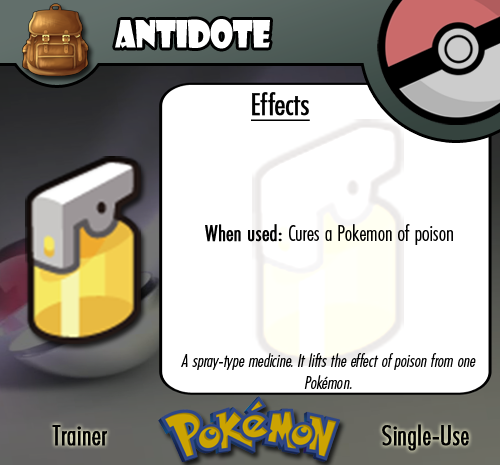
<style>
.page{position:relative;width:500px;height:465px;background:#ffffff}
.page>*{position:absolute;margin:0}
.t1{font:36.7px "ShowcardGothic-Reg";letter-spacing:-0.025em;color:#ffffff;scale:0.91 1}
.t2{font:22.2px "FuturaCondensedBQ-Light";color:#010101}
.t3{font:27.8px "FuturaCondensedBQ-Light";color:#010101;font-weight:bold}
.t4{font:30.6px "FuturaCondensedBQ-Light";color:#010101;font-weight:bold;text-decoration:underline}
.t5{font:22.2px "FuturaCondensedBQ-Light";color:#010101;font-weight:bold}
.t6{font:18.1px "FuturaCondensedBQ-Light";color:#010101;font-style:italic}
</style>
<div class="page">
<p class="t1" style="left:115px;top:19px;width:155px;height:30px">Antidote</p>
<p class="t2" style="left:205px;top:92px;width:248px;height:153px"><span class="t3">  </span><span class="t4">Effects<br><br><br><br></span><span class="t5">When used: </span>Cures a Pokemon of poison</p>
<p class="t6" style="left:181px;top:353px;width:295px;height:36px;text-align:center">A spray-type medicine. It lifts the effect of poison from one Pokémon.</p>
<p class="t3" style="left:52px;top:425px;width:55px;height:21px">Trainer</p>
<p class="t3" style="left:382px;top:424px;width:87px;height:27px">Single-Use</p>
</div>
